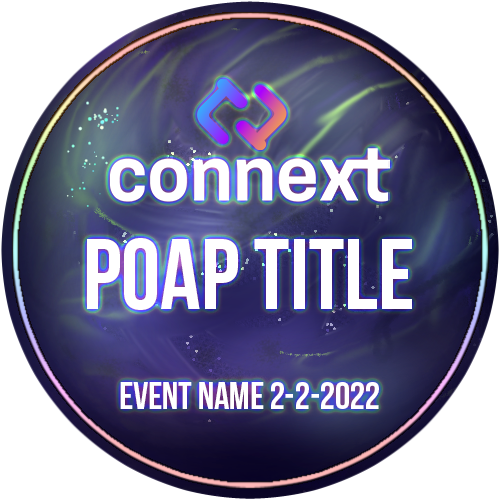
<style>
.page{position:relative;width:500px;height:500px;background:#ffffff}
.page>*{position:absolute;margin:0}
.t1{font:100px "BebasNeue";color:#ffffff}
.t2{font:37.8px "BebasNeue";color:#ffffff}
</style>
<div class="page">
<p class="t1" style="left:87px;top:238px;width:325px;height:72px">poap title</p>
<p class="t2" style="left:120px;top:382px;width:259px;height:27px">Event name 2-2-2022</p>
</div>
